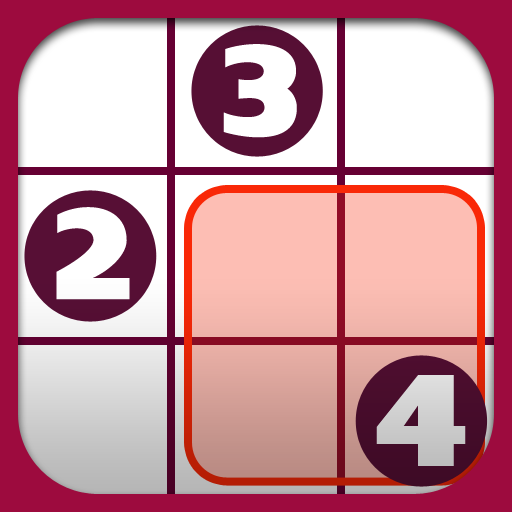
<style>
.page{position:relative;width:512px;height:512px;background:#ffffff}
.page>*{position:absolute;margin:0}
.t1{font:129.6px "Insolent";color:#ffffff;text-transform:uppercase}
.t2{font:129.6px "Insolent";color:#cccccc;text-transform:uppercase}
</style>
<div class="page">
<p class="t1" style="left:223px;top:44px;width:74px;height:94px">3</p>
<p class="t1" style="left:56px;top:207px;width:74px;height:93px">2</p>
<p class="t2" style="left:376px;top:375px;width:90px;height:91px">4</p>
</div>
